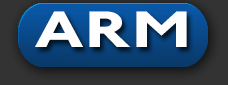
<style>
.page{position:relative;width:228px;height:85px}
.page>*{position:absolute;margin:0}
.t1{font:52.9px "JohnstonITC-BoldSC";color:#fffefe;scale:1.39 1}
</style>
<div class="page">
<p class="t1" style="left:35px;top:11px;width:152px;height:36px">ARM</p>
</div>
